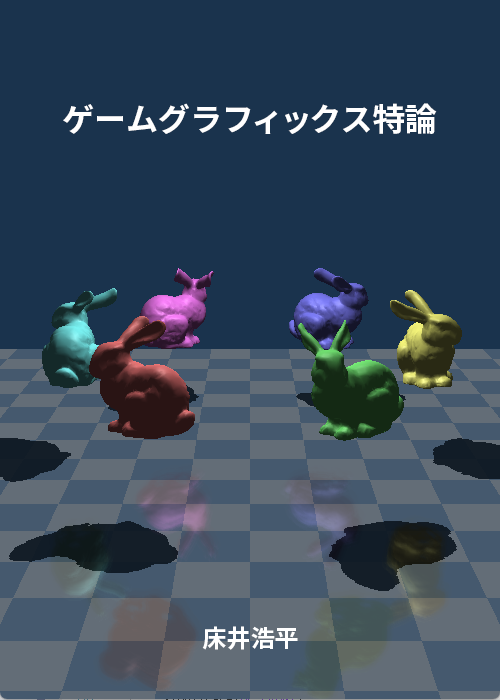
<style>
.page{position:relative;width:500px;height:700px;background:#1a334d}
.page>*{position:absolute;margin:0}
.t1{font:32px "SourceHanSans-Bold";color:#ffffff}
.t2{font:32px "SourceHanSans-Bold";letter-spacing:-0.1em;color:#ffffff}
.t3{font:24px "SourceHanSans-Bold";color:#ffffff}
</style>
<div class="page">
<p class="t1" style="left:63px;top:103px;width:374px;height:31px">ゲームグラ<span class="t2">フィッ</span>クス特論</p>
<p class="t3" style="left:202px;top:626px;width:96px;height:24px">床井浩平</p>
</div>
